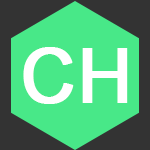
<style>
.page{position:relative;width:150px;height:150px;background:#48e888}
.page>*{position:absolute;margin:0}
.t1{font:76.2px "ArialNarrow";color:#ffffff;font-weight:bold;scale:1.2 1}
</style>
<div class="page">
<p class="t1" style="left:23px;top:47px;width:105px;height:57px">CH</p>
</div>
